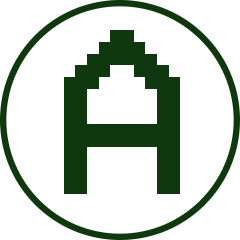
<style>
.page{position:relative;width:240px;height:240px;background:#ffffff}
.page>*{position:absolute;margin:0}
.t1{font:240px "VCROSDMono";color:#0f380f}
</style>
<div class="page">
<p class="t1" style="left:64px;top:30px;width:116px;height:164px">A</p>
</div>
